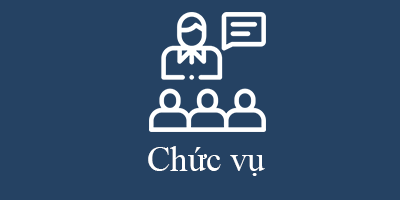
<style>
.page{position:relative;width:400px;height:200px;background:#254263}
.page>*{position:absolute;margin:0}
.t1{font:34.5px "TimesNewRomanPSMT";color:#ffffff}
</style>
<div class="page">
<p class="t1" style="left:148px;top:146px;width:117px;height:30px">Chức vụ</p>
</div>
